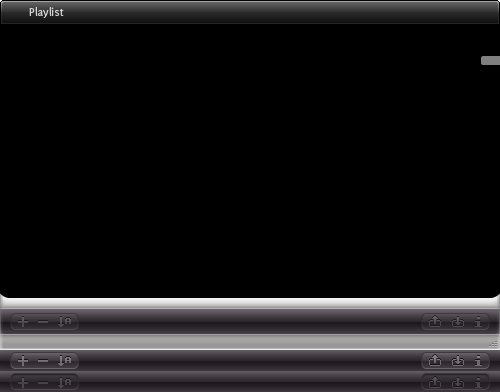
<style>
.page{position:relative;width:500px;height:392px;background:#000000}
.page>*{position:absolute;margin:0}
.t1{font:12px "Delicious-Roman";color:#d5d5d5}
</style>
<div class="page">
<p class="t1" style="left:29px;top:7px;width:35px;height:11px">Playlist</p>
</div>
